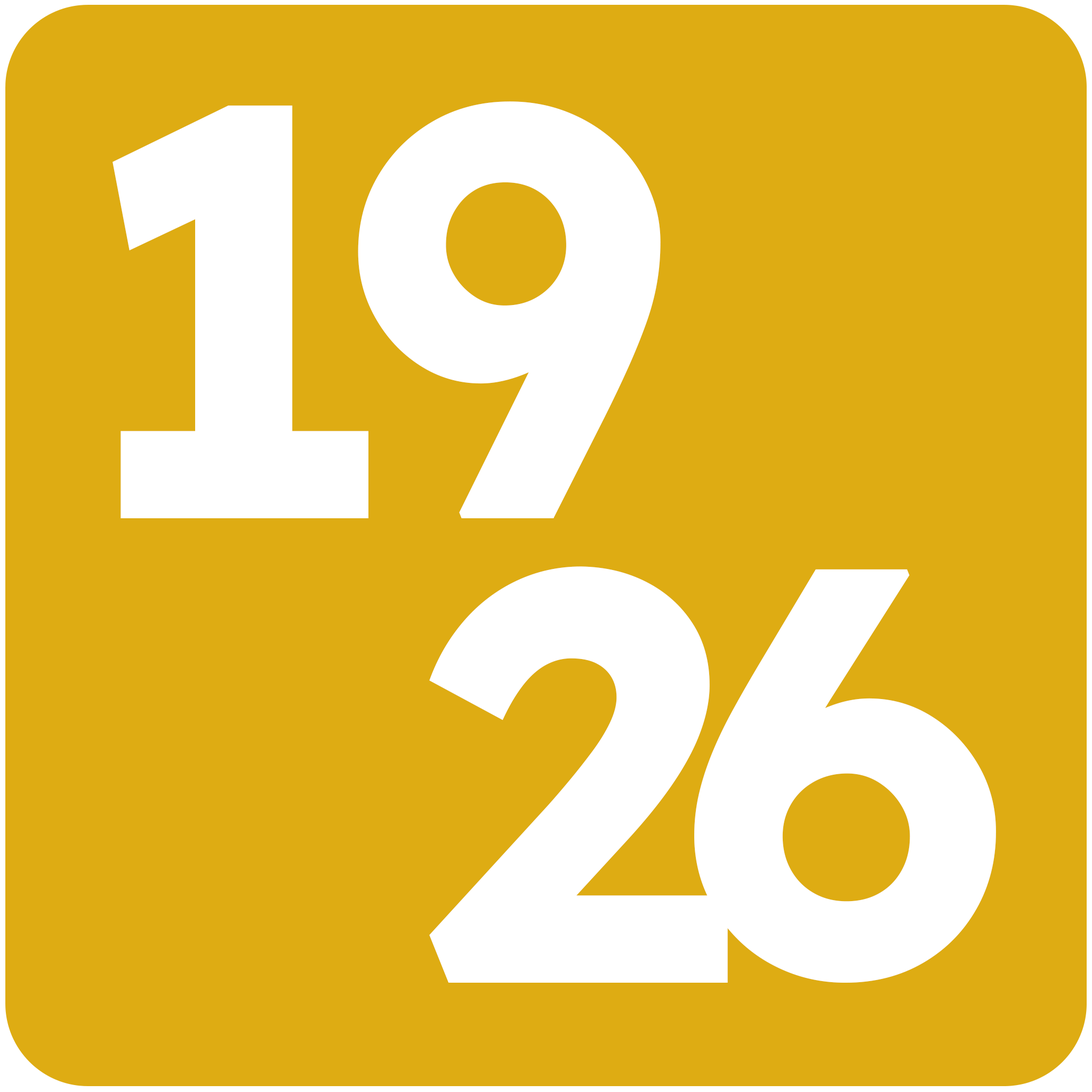
<style>
.page{position:relative;width:1092px;height:1092px;background:#deac13}
.page>*{position:absolute;margin:0}
.t1{font:581.3px "Lexend-Bold";letter-spacing:-0.1em;color:#ffffff}
</style>
<div class="page">
<p class="t1" style="left:113px;top:101px;width:548px;height:417px">19</p>
<p class="t1" style="left:429px;top:566px;width:567px;height:417px">26</p>
</div>
